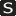
<style>
.page{position:relative;width:16px;height:16px;background:#222120}
.page>*{position:absolute;margin:0}
.t1{font:14px "Tahoma";color:#ffffff;scale:1.28 1}
</style>
<div class="page">
<p class="t1" style="left:3px;top:2px;width:10px;height:12px">S</p>
</div>
